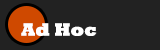
<style>
.page{position:relative;width:160px;height:50px;background:#222222}
.page>*{position:absolute;margin:0}
.t1{font:18.3px "Rockwell-ExtraBold";color:#ffffff}
</style>
<div class="page">
<p class="t1" style="left:21px;top:23px;width:76px;height:13px">Ad Hoc</p>
</div>
